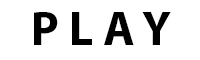
<style>
.page{position:relative;width:200px;height:60px;background:#ffffff}
.page>*{position:absolute;margin:0}
.t1{font:48px "MyriadPro-Bold";color:#000000}
</style>
<div class="page">
<p class="t1" style="left:34px;top:12px;width:137px;height:33px">P L A Y</p>
</div>
